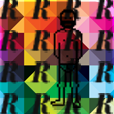
<style>
.page{position:relative;width:114px;height:114px}
.page>*{position:absolute;margin:0}
.t1{font:18px "BodoniBE-BoldCnItalic";color:#131313}
</style>
<div class="page">
<p class="t1" style="left:67px;top:58px;width:12px;height:14px">R</p>
</div>
